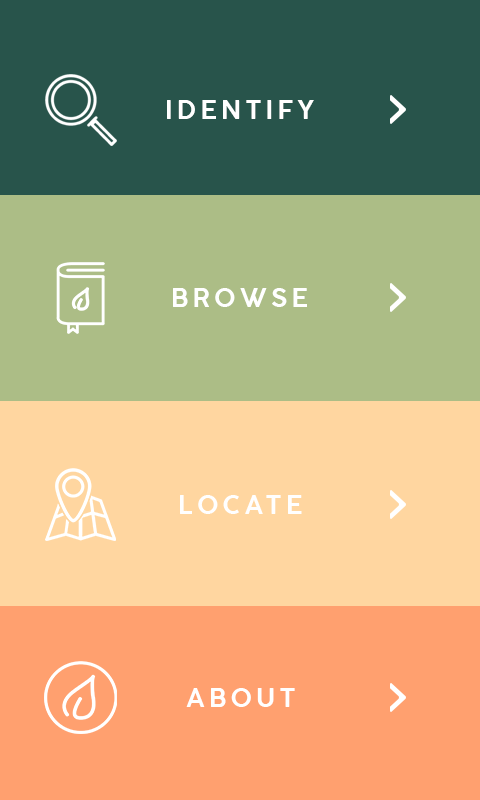
<style>
.page{position:relative;width:480px;height:800px;background:#ffd6a0}
.page>*{position:absolute;margin:0}
.t1{font:25px "COCOGOOSE-DemiBold";letter-spacing:0.165em;color:#ffffff}
</style>
<div class="page">
<p class="t1" style="left:167px;top:100px;width:147px;height:19px">IDENTIFY</p>
<p class="t1" style="left:173px;top:288px;width:134px;height:19px">BROWSE</p>
<p class="t1" style="left:180px;top:495px;width:122px;height:19px">LOCATE</p>
<p class="t1" style="left:186px;top:688px;width:109px;height:19px">ABOUT</p>
</div>
